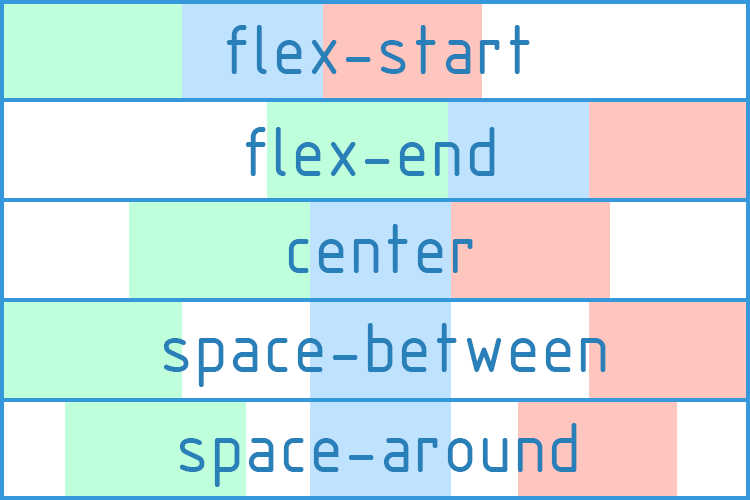
<style>
.page{position:relative;width:750px;height:500px;background:#ffffff}
.page>*{position:absolute;margin:0}
.t1{font:76px "ISOCPEUR";letter-spacing:0.006em;color:#2980b9}
</style>
<div class="page">
<p class="t1" style="left:226px;top:25px;width:304px;height:49px">flex-start</p>
<p class="t1" style="left:245px;top:127px;width:250px;height:49px">flex-end</p>
<p class="t1" style="left:288px;top:224px;width:185px;height:49px">center</p>
<p class="t1" style="left:163px;top:323px;width:443px;height:64px">space-between</p>
<p class="t1" style="left:179px;top:423px;width:398px;height:64px">space-around</p>
</div>
